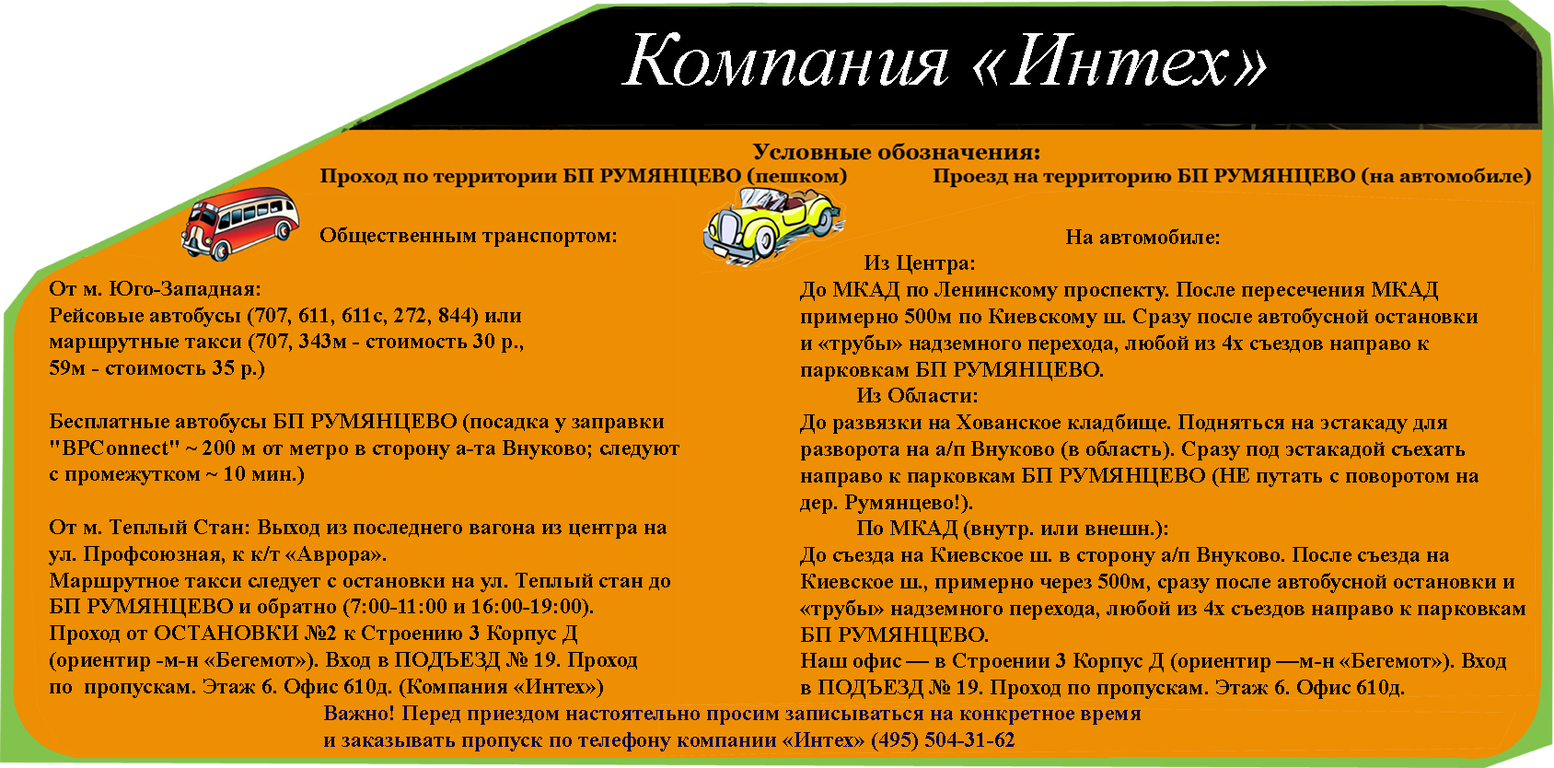
<style>
.page{position:relative;width:1554px;height:768px;background:#ee8e03}
.page>*{position:absolute;margin:0}
.t1{font:78.2px "TimesNewRomanPS-ItalicMT";color:#fbfcfb}
.t2{font:22.1px "TimesNewRomanPS-BoldMT";color:#000000}
.t3{font:22.1px "TimesNewRomanPS-BoldMT";color:#0b044a}
</style>
<div class="page">
<p class="t1" style="left:621px;top:32px;width:645px;height:54px">Компания «Интех»</p>
<p class="t2" style="left:49px;top:226px;width:630px;height:472px">Общественным транспортом:<br><br>От м. Юго-Западная: <br>Рейсовые автобусы (707, 611, 611с, 272, 844) или <br>маршрутные такси (707, 343м - стоимость 30 р., <br>59м - стоимость 35 р.)<br><br>Бесплатные автобусы БП РУМЯНЦЕВО (посадка у заправки<br>"ВРConnect" ~ 200 м от метро в сторону а-та Внуково; следуют<br>с промежутком ~ 10 мин.)<br><br>От м. Теплый Стан: Выход из последнего вагона из центра на <br>ул. Профсоюзная, к к/т «Аврора».<br>Маршрутное такси следует с остановки на ул. Теплый стан до <br>БП РУМЯНЦЕВО и обратно (7:00-11:00 и 16:00-19:00).<br>Проход от ОСТАНОВКИ №2 к Строению 3 Корпус Д <br>(ориентир -м-н «Бегемот»). Вход в ПОДЪЕЗД № 19. Проход <br>по  пропускам. Этаж 6. Офис 610д. (Компания «Интех»)</p>
<p class="t2" style="left:800px;top:228px;width:725px;height:471px">На автомобиле:<br>        Из Центра: <br>До МКАД по Ленинскому проспекту. После пересечения МКАД <br>примерно 500м по Киевскому ш. Сразу после автобусной остановки <br>и «трубы» надземного перехода, любой из 4х съездов направо к <br>парковкам БП РУМЯНЦЕВО.<br>       Из Области: <br>До развязки на Хованское кладбище. Подняться на эстакаду для <br>разворота на а/п Внуково (в область). Сразу под эстакадой съехать <br>направо к парковкам БП РУМЯНЦЕВО (НЕ путать с поворотом на <br>дер. Румянцево!).<br>       По МКАД (внутр. или внешн.): <br>До съезда на Киевское ш. в сторону а/п Внуково. После съезда на <br>Киевское ш., примерно через 500м, сразу после автобусной остановки и <br>«трубы» надземного перехода, любой из 4х съездов направо к парковкам <br>БП РУМЯНЦЕВО.<br>Наш офис — в Строении 3 Корпус Д (ориентир —м-н «Бегемот»). Вход <br>в ПОДЪЕЗД № 19. Проход по пропускам. Этаж 6. Офис 610д.</p>
<p class="t3" style="left:324px;top:705px;width:816px;height:46px">Важно! Перед приездом настоятельно просим записываться на конкретное время <br>и заказывать пропуск по телефону компании «Интех» (495) 504-31-62</p>
</div>
